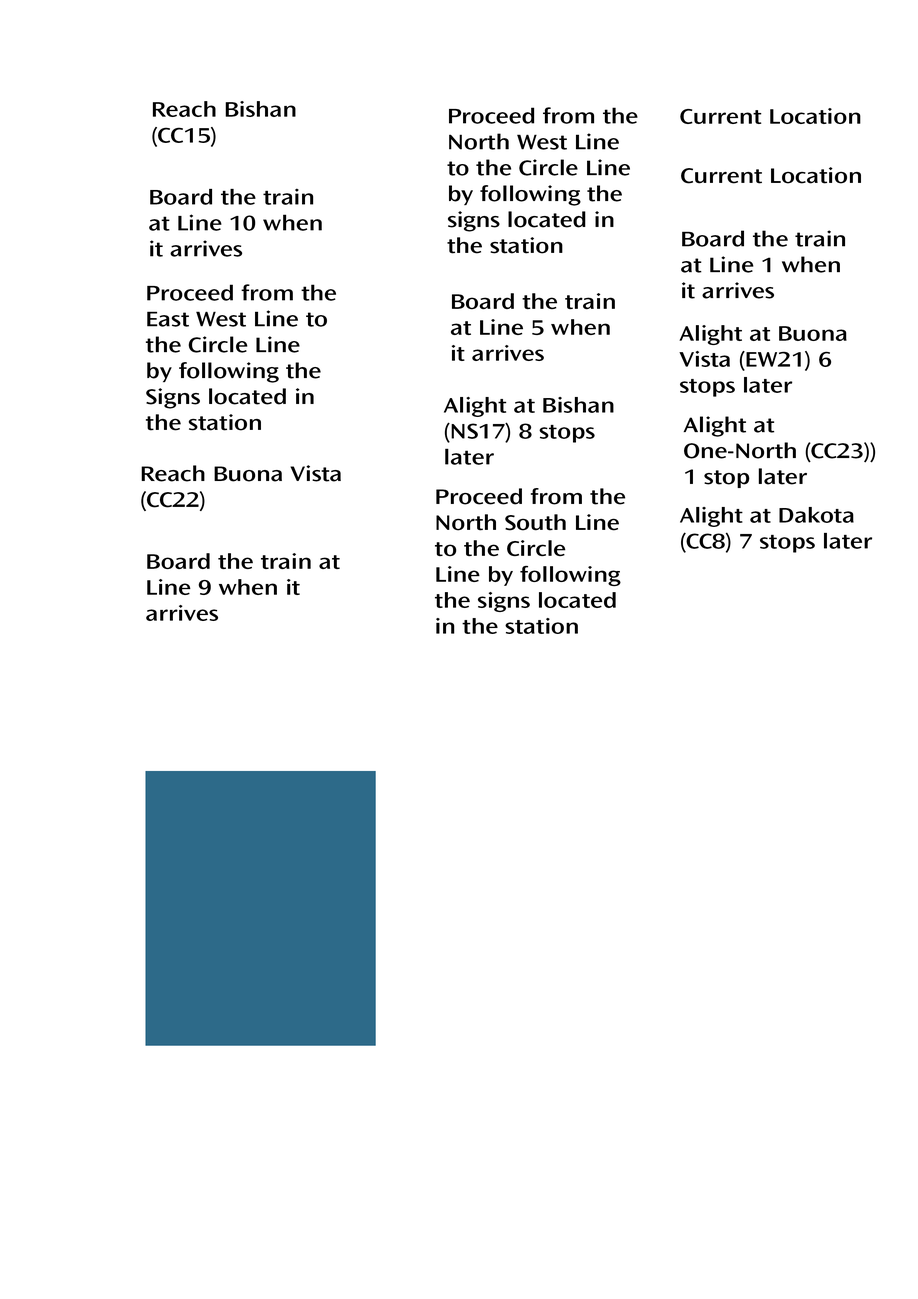
<style>
.page{position:relative;width:918px;height:1299px;background:#ffffff}
.page>*{position:absolute;margin:0}
.t1{font:21.6px "OceanSansStd-SemiboldExt";color:#000000}
</style>
<div class="page">
<p class="t1" style="left:152px;top:101px;width:143px;height:46px">Reach Bishan <br>(CC15)</p>
<p class="t1" style="left:448px;top:107px;width:190px;height:146px">Proceed from the <br>North West Line<br>to the Circle Line<br>by following the<br>signs located in<br>the station</p>
<p class="t1" style="left:680px;top:108px;width:180px;height:16px">Current Location</p>
<p class="t1" style="left:681px;top:167px;width:180px;height:16px">Current Location</p>
<p class="t1" style="left:149px;top:188px;width:173px;height:69px">Board the train<br>at Line 10 when<br>it arrives</p>
<p class="t1" style="left:681px;top:230px;width:164px;height:68px">Board the train<br>at Line 1 when<br>it arrives</p>
<p class="t1" style="left:146px;top:284px;width:190px;height:146px">Proceed from the<br>East West Line to<br>the Circle Line<br>by following the<br>Signs located in <br>the station</p>
<p class="t1" style="left:451px;top:293px;width:164px;height:68px">Board the train<br>at Line 5 when<br>it arrives</p>
<p class="t1" style="left:679px;top:325px;width:168px;height:72px">Alight at Buona <br>Vista (EW21) 6 <br>stops later</p>
<p class="t1" style="left:444px;top:397px;width:169px;height:68px">Alight at Bishan<br>(NS17) 8 stops<br>later</p>
<p class="t1" style="left:683px;top:416px;width:193px;height:72px">Alight at <br>One-North (CC23))<br>1 stop later</p>
<p class="t1" style="left:141px;top:465px;width:200px;height:46px">Reach Buona Vista<br>(CC22)</p>
<p class="t1" style="left:435px;top:488px;width:190px;height:146px">Proceed from the<br>North South Line<br>to the Circle<br>Line by following<br>the signs located<br>in the station</p>
<p class="t1" style="left:680px;top:506px;width:193px;height:47px">Alight at Dakota<br>(CC8) 7 stops later</p>
<p class="t1" style="left:146px;top:553px;width:194px;height:68px">Board the train at<br>Line 9 when it<br>arrives</p>
</div>
